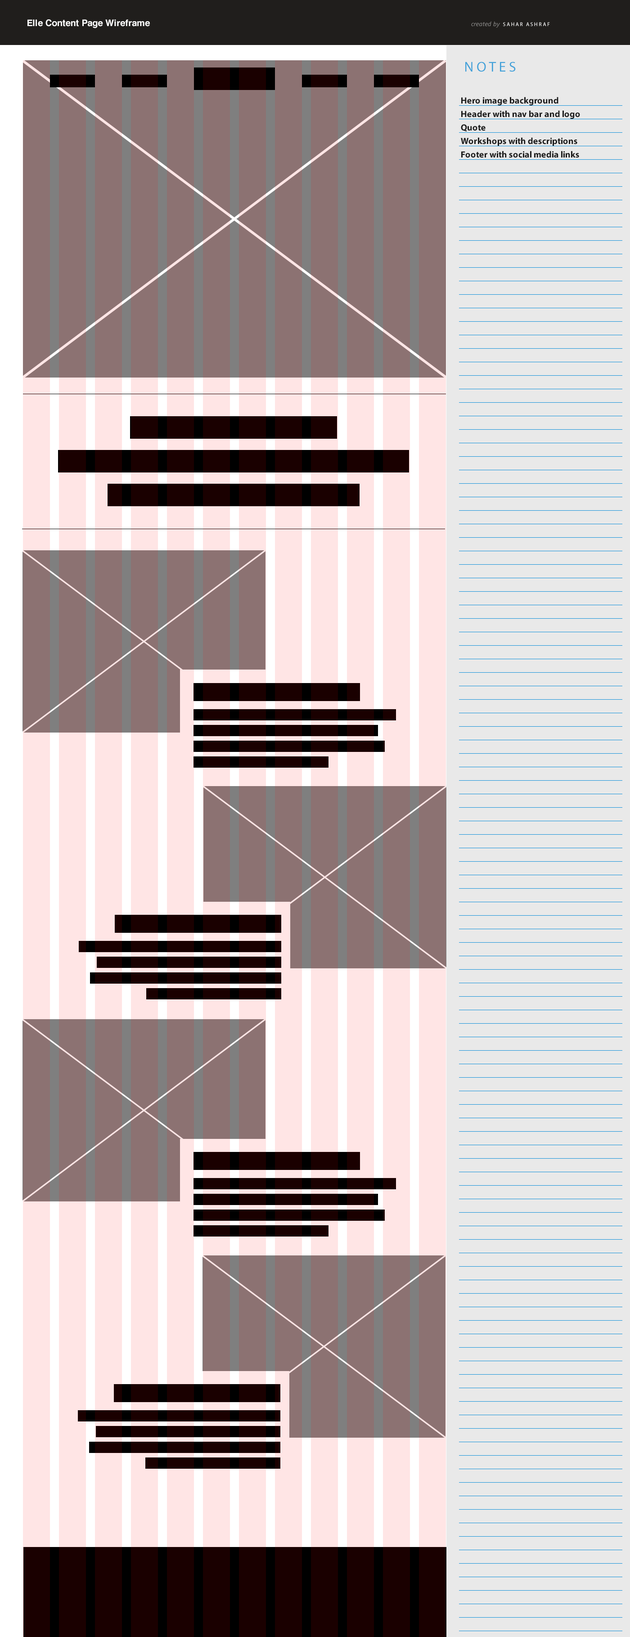
<style>
.page{position:relative;width:630px;height:1637px}
.page>*{position:absolute;margin:0}
.t1{font:9px "Helvetica-Bold";color:#ffffff}
.t2{font:6.3px "SegoeUI-Italic";color:#908f8e}
.t3{font:5.4px "MyriadPro-Regular";letter-spacing:0.2em;color:#ffffff;text-transform:uppercase}
.t4{font:14.2px "MyriadPro-Regular";letter-spacing:0.2em;color:#41a1d9;text-transform:uppercase}
.t5{font:9px/13.5px "MyriadPro-Bold";color:#1b1b1b}
</style>
<div class="page">
<p class="t1" style="left:27px;top:19px;width:123px;height:9px">Elle Content Page Wireframe</p>
<p class="t2" style="left:471px;top:21px;width:29px;height:7px">created by</p>
<p class="t3" style="left:503px;top:22px;width:47px;height:4px">Sahar Ashraf</p>
<p class="t4" style="left:465px;top:62px;width:51px;height:10px">NOTES</p>
<p class="t5" style="left:461px;top:97px;width:119px;height:61px">Hero image background<br>Header with nav bar and logo<br>Quote<br>Workshops with descriptions<br>Footer with social media links</p>
</div>
